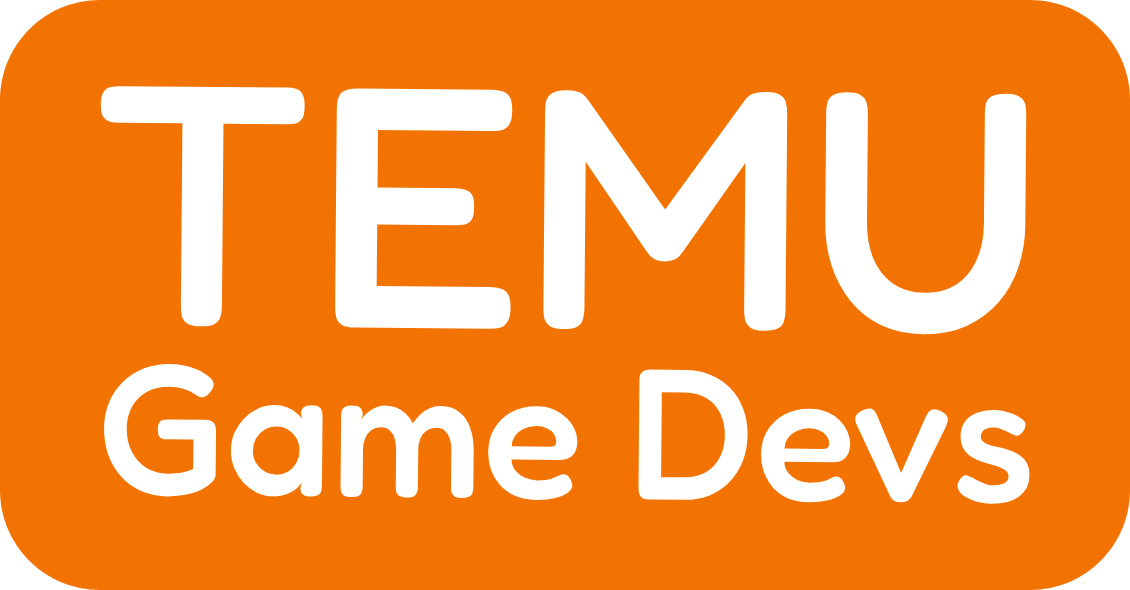
<style>
.page{position:relative;width:1130px;height:590px;background:#f37302}
.page>*{position:absolute;margin:0}
.t1{font:186px "Fredoka-Medium";color:#ffffff}
.t2{font:342px "Fredoka-Medium";color:#ffffff}
</style>
<div class="page">
<p class="t1" style="left:100px;top:86px;width:930px;height:418px;text-align:center"><span class="t2">TEMU<br></span>Game Devs</p>
</div>
